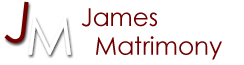
<style>
.page{position:relative;width:244px;height:65px;background:#ffffff}
.page>*{position:absolute;margin:0}
.t1{font:57px "CenturyGothic";color:#700000}
.t2{font:24.7px/28.8px "CenturyGothic";color:#700000}
</style>
<div class="page">
<p class="t1" style="left:4px;top:1px;width:25px;height:42px;rotate:6deg">J</p>
<p class="t2" style="left:81px;top:8px;width:141px;height:52px">James<br>   Matrimony</p>
</div>
